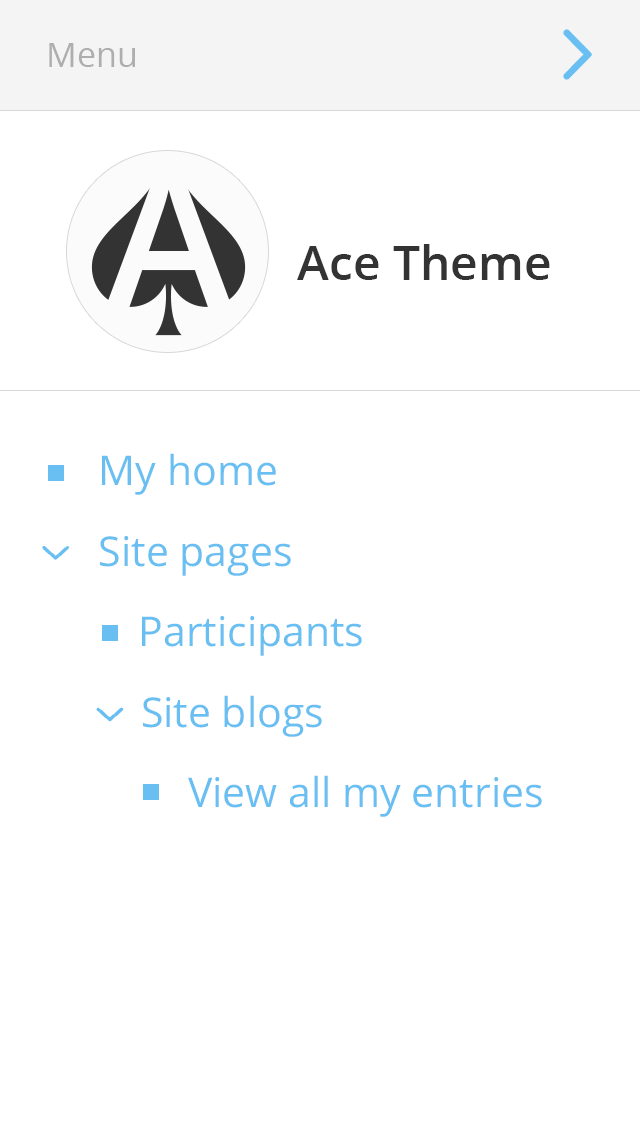
<style>
.page{position:relative;width:640px;height:1136px;background:#ffffff}
.page>*{position:absolute;margin:0}
.t1{font:34px "OpenSans";color:#aeaeae}
.t2{font:48px "OpenSans-Semibold";color:#333333}
.t3{font:41px "OpenSans";color:#69bff1}
</style>
<div class="page">
<p class="t1" style="left:49px;top:43px;width:86px;height:24px">Menu</p>
<p class="t2" style="left:297px;top:244px;width:253px;height:36px">Ace Theme</p>
<p class="t3" style="left:102px;top:453px;width:174px;height:42px">My home</p>
<p class="t3" style="left:100px;top:536px;width:191px;height:40px">Site pages</p>
<p class="t3" style="left:142px;top:616px;width:220px;height:40px">Participants</p>
<p class="t3" style="left:143px;top:695px;width:179px;height:42px">Site blogs</p>
<p class="t3" style="left:188px;top:775px;width:354px;height:42px">View all my entries</p>
</div>
